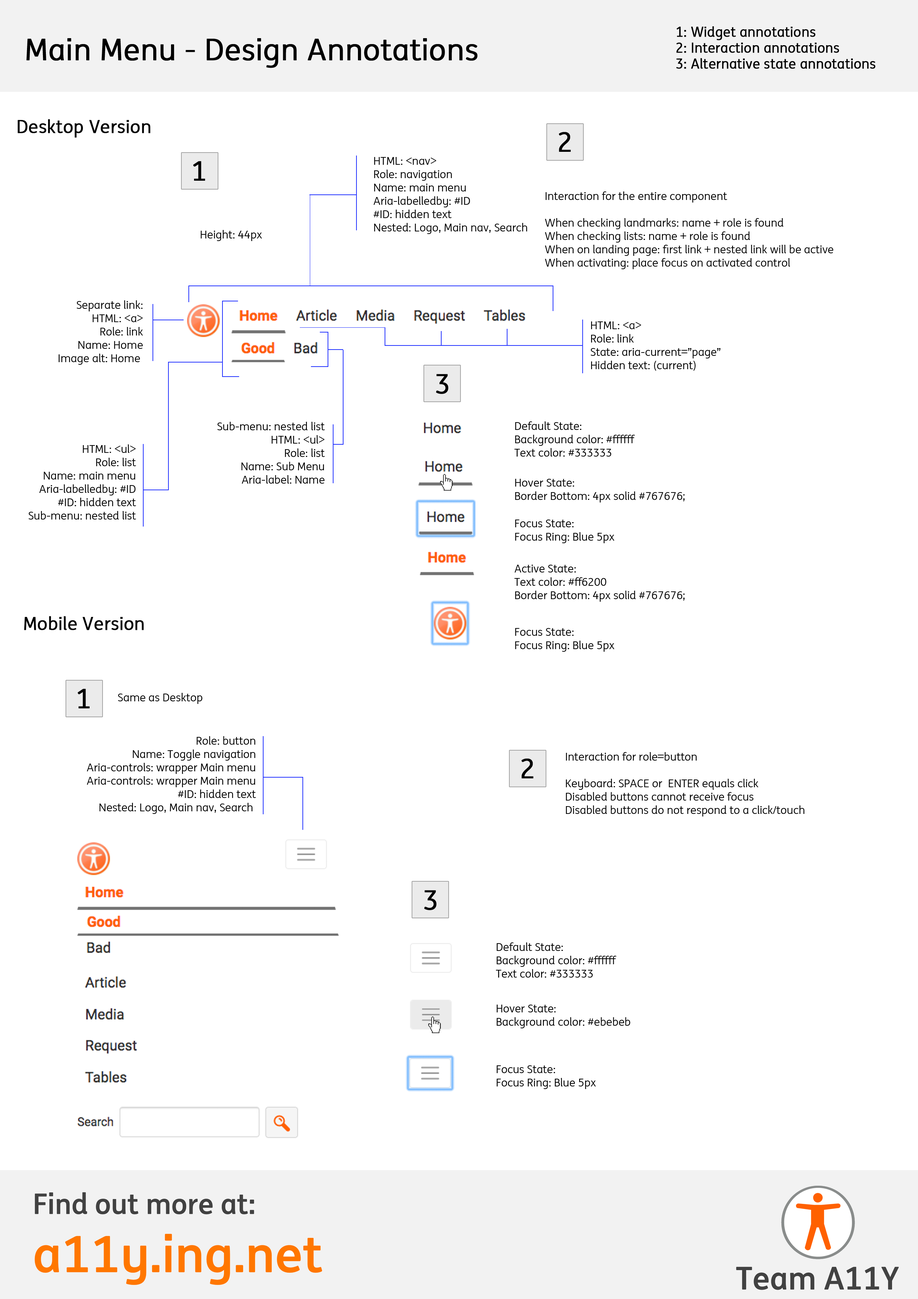
<style>
.page{position:relative;width:918px;height:1299px;background:#ffffff}
.page>*{position:absolute;margin:0}
.t1{font:13.3px "INGMe";color:#000000;font-weight:bold}
.t2{font:29.6px "INGMe";color:#000000;font-weight:bold}
.t3{font:17.8px "INGMe";color:#000000;font-weight:bold}
.t4{font:26.7px "INGMe";color:#000000;font-weight:bold}
.t5{font:11.1px "INGMe";color:#000000}
</style>
<div class="page">
<p class="t1" style="left:676px;top:26px;width:200px;height:43px">1: Widget annotations<br>2: Interaction annotations<br>3: Alternative state annotations</p>
<p class="t2" style="left:26px;top:38px;width:452px;height:30px">Main Menu - Design Annotations</p>
<p class="t3" style="left:17px;top:119px;width:133px;height:19px">Desktop Version</p>
<p class="t4" style="left:559px;top:132px;width:12px;height:20px">2</p>
<p class="t4" style="left:193px;top:161px;width:12px;height:20px">1</p>
<p class="t5" style="left:374px;top:157px;width:153px;height:77px">HTML: &lt;nav&gt;<br>Role: navigation<br>Name: main menu<br>Aria-labelledby: #ID<br>#ID: hidden text<br>Nested: Logo, Main nav, Search</p>
<p class="t5" style="left:545px;top:191px;width:288px;height:78px">Interaction for the entire component<br><br>When checking landmarks: name + role is found<br>When checking lists: name + role is found<br>When on landing page: first link + nested link will be active<br>When activating: place focus on activated control</p>
<p class="t5" style="left:201px;top:230px;width:61px;height:11px">Height: 44px</p>
<p class="t5" style="left:58px;top:300px;width:85px;height:65px;text-align:right">Separate link:<br>HTML: &lt;a&gt;<br>Role: link<br>Name: Home<br>Image alt: Home</p>
<p class="t5" style="left:591px;top:321px;width:130px;height:50px">HTML: &lt;a&gt;<br>Role: link<br>State: aria-current=”page”<br>Hidden text: (current)</p>
<p class="t4" style="left:436px;top:374px;width:12px;height:20px">3</p>
<p class="t5" style="left:217px;top:422px;width:108px;height:62px;text-align:right">Sub-menu: nested list<br>HTML: &lt;ul&gt;<br>Role: list<br>Name: Sub Menu<br>Aria-label: Name</p>
<p class="t5" style="left:514px;top:421px;width:121px;height:35px">Default State:<br>Background color: #ffffff<br>Text color: #333333</p>
<p class="t5" style="left:29px;top:444px;width:107px;height:75px;text-align:right">HTML: &lt;ul&gt;<br>Role: list<br>Name: main menu<br>Aria-labelledby: #ID<br>#ID: hidden text<br>Sub-menu: nested list</p>
<p class="t5" style="left:515px;top:479px;width:170px;height:23px">Hover State:<br>Border Bottom: 4px solid #767676;</p>
<p class="t5" style="left:515px;top:519px;width:100px;height:24px">Focus State:<br>Focus Ring: Blue 5px</p>
<p class="t5" style="left:514px;top:565px;width:171px;height:37px">Active State:<br>Text color: #ff6200<br>Border Bottom: 4px solid #767676;</p>
<p class="t3" style="left:24px;top:616px;width:120px;height:14px">Mobile Version</p>
<p class="t5" style="left:515px;top:628px;width:100px;height:24px">Focus State:<br>Focus Ring: Blue 5px</p>
<p class="t4" style="left:78px;top:689px;width:12px;height:19px">1</p>
<p class="t5" style="left:118px;top:693px;width:85px;height:11px">Same as Desktop</p>
<p class="t5" style="left:87px;top:736px;width:169px;height:78px;text-align:right">Role: button<br>Name: Toggle navigation<br>Aria-controls: wrapper Main menu<br>Aria-controls: wrapper Main menu<br>#ID: hidden text<br>Nested: Logo, Main nav, Search</p>
<p class="t4" style="left:522px;top:758px;width:11px;height:20px">2</p>
<p class="t5" style="left:566px;top:752px;width:238px;height:64px">Interaction for role=button<br><br>Keyboard: SPACE or  ENTER equals click<br>Disabled buttons cannot receive focus<br>Disabled buttons do not respond to a click/touch</p>
<p class="t4" style="left:424px;top:890px;width:12px;height:20px">3</p>
<p class="t5" style="left:496px;top:942px;width:120px;height:35px">Default State:<br>Background color: #ffffff<br>Text color: #333333</p>
<p class="t5" style="left:496px;top:1004px;width:134px;height:24px">Hover State:<br>Background color: #ebebeb</p>
<p class="t5" style="left:496px;top:1065px;width:100px;height:24px">Focus State:<br>Focus Ring: Blue 5px</p>
</div>
